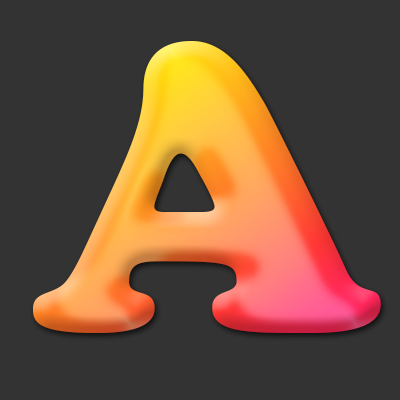
<style>
.page{position:relative;width:400px;height:400px;background:#333333}
.page>*{position:absolute;margin:0}
.t1{font:400px "CooperBlackStd"}
</style>
<div class="page">
<p class="t1" style="left:32px;top:41px;width:349px;height:292px">A</p>
</div>
